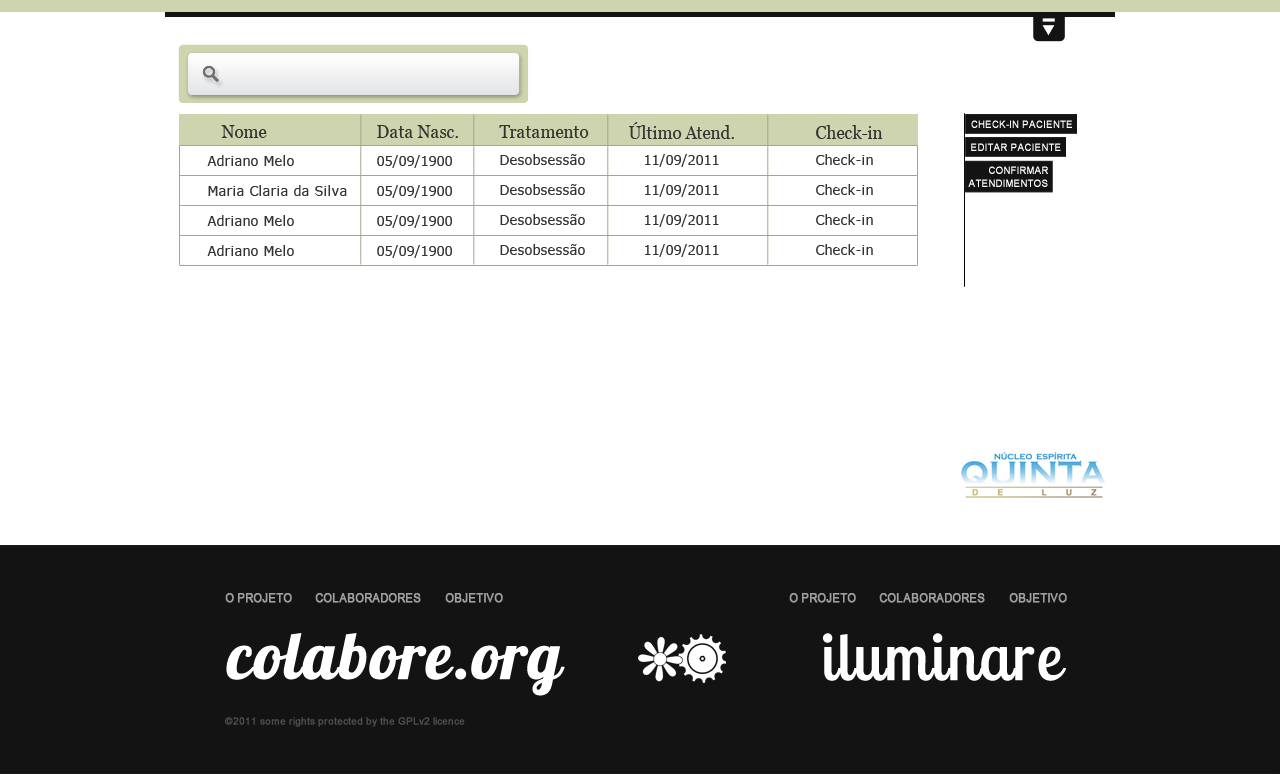
<style>
.page{position:relative;width:1280px;height:774px;background:#ffffff}
.page>*{position:absolute;margin:0}
.t1{font:18px "Georgia";color:#333333;scale:0.94 1}
.t2{font:10px "ArialMT";color:#ffffff;text-transform:uppercase;font-weight:bold;scale:0.94 1}
.t3{font:14px "Verdana";color:#333333;scale:0.94 1}
.t4{font:10px/13px "ArialMT";color:#ffffff;text-transform:uppercase;font-weight:bold;scale:0.94 1}
.t5{font:12px "ArialMT";color:#9f9f9f;font-weight:bold;scale:0.94 1}
.t6{font:65px "Lobster1.4";color:#ffffff;font-weight:bold}
.t7{font:65px "LobsterTwo";color:#ffffff;font-weight:bold}
.t8{font:10px "ArialMT";color:#4f4f4f;font-weight:bold}
</style>
<div class="page">
<p class="t1" style="left:221px;top:125px;width:46px;height:13px">Nome</p>
<p class="t1" style="left:377px;top:125px;width:81px;height:13px">Data Nasc.</p>
<p class="t1" style="left:499px;top:125px;width:90px;height:13px">Tratamento</p>
<p class="t1" style="left:629px;top:122px;width:105px;height:17px">Último Atend.</p>
<p class="t1" style="left:816px;top:125px;width:67px;height:14px">Check-in</p>
<p class="t2" style="left:971px;top:120px;width:101px;height:8px">CHECK-IN PACIENTE</p>
<p class="t2" style="left:971px;top:143px;width:90px;height:8px">EDITAR PACIENTE</p>
<p class="t3" style="left:207px;top:155px;width:87px;height:11px">Adriano Melo</p>
<p class="t3" style="left:377px;top:155px;width:75px;height:13px">05/09/1900</p>
<p class="t3" style="left:500px;top:154px;width:85px;height:11px">Desobsessão</p>
<p class="t3" style="left:645px;top:154px;width:74px;height:13px">11/09/2011</p>
<p class="t3" style="left:816px;top:154px;width:57px;height:11px">Check-in</p>
<p class="t4" style="left:968px;top:166px;width:80px;height:21px;text-align:right">CONFIRMAR<br>ATENDIMENTOS</p>
<p class="t3" style="left:208px;top:185px;width:139px;height:11px">Maria Claria da Silva</p>
<p class="t3" style="left:377px;top:185px;width:75px;height:13px">05/09/1900</p>
<p class="t3" style="left:500px;top:184px;width:85px;height:11px">Desobsessão</p>
<p class="t3" style="left:645px;top:184px;width:74px;height:13px">11/09/2011</p>
<p class="t3" style="left:816px;top:184px;width:57px;height:11px">Check-in</p>
<p class="t3" style="left:207px;top:215px;width:87px;height:11px">Adriano Melo</p>
<p class="t3" style="left:377px;top:215px;width:75px;height:13px">05/09/1900</p>
<p class="t3" style="left:500px;top:214px;width:85px;height:11px">Desobsessão</p>
<p class="t3" style="left:645px;top:214px;width:74px;height:13px">11/09/2011</p>
<p class="t3" style="left:816px;top:214px;width:57px;height:11px">Check-in</p>
<p class="t3" style="left:207px;top:245px;width:87px;height:11px">Adriano Melo</p>
<p class="t3" style="left:377px;top:245px;width:75px;height:13px">05/09/1900</p>
<p class="t3" style="left:500px;top:244px;width:85px;height:11px">Desobsessão</p>
<p class="t3" style="left:645px;top:244px;width:74px;height:13px">11/09/2011</p>
<p class="t3" style="left:816px;top:244px;width:57px;height:11px">Check-in</p>
<p class="t5" style="left:225px;top:593px;width:67px;height:10px">O PROJETO</p>
<p class="t5" style="left:315px;top:593px;width:106px;height:10px">COLABORADORES</p>
<p class="t5" style="left:445px;top:593px;width:58px;height:10px">OBJETIVO</p>
<p class="t5" style="left:789px;top:593px;width:67px;height:10px">O PROJETO</p>
<p class="t5" style="left:879px;top:593px;width:106px;height:10px">COLABORADORES</p>
<p class="t5" style="left:1009px;top:593px;width:58px;height:10px">OBJETIVO</p>
<p class="t6" style="left:226px;top:633px;width:339px;height:63px">colabore.org</p>
<p class="t7" style="left:823px;top:633px;width:243px;height:48px">iluminare</p>
<p class="t8" style="left:225px;top:717px;width:240px;height:10px">©2011 some rights protected by the GPLv2 licence</p>
</div>
